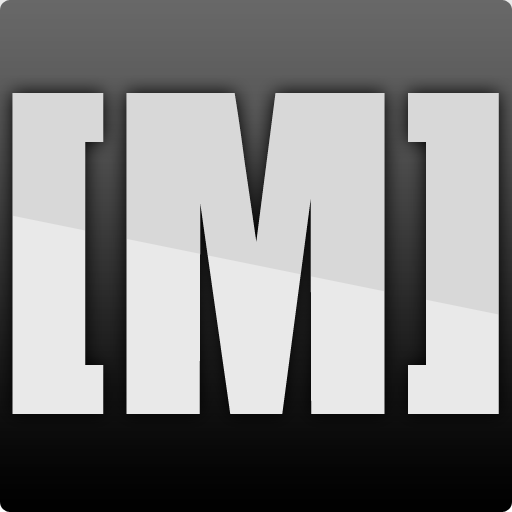
<style>
.page{position:relative;width:512px;height:512px;background:#d8d8d8}
.page>*{position:absolute;margin:0}
.t1{font:406.1px "Impact";color:#eaeaea}
</style>
<div class="page">
<p class="t1" style="left:12px;top:93px;width:487px;height:321px">[M]</p>
</div>
